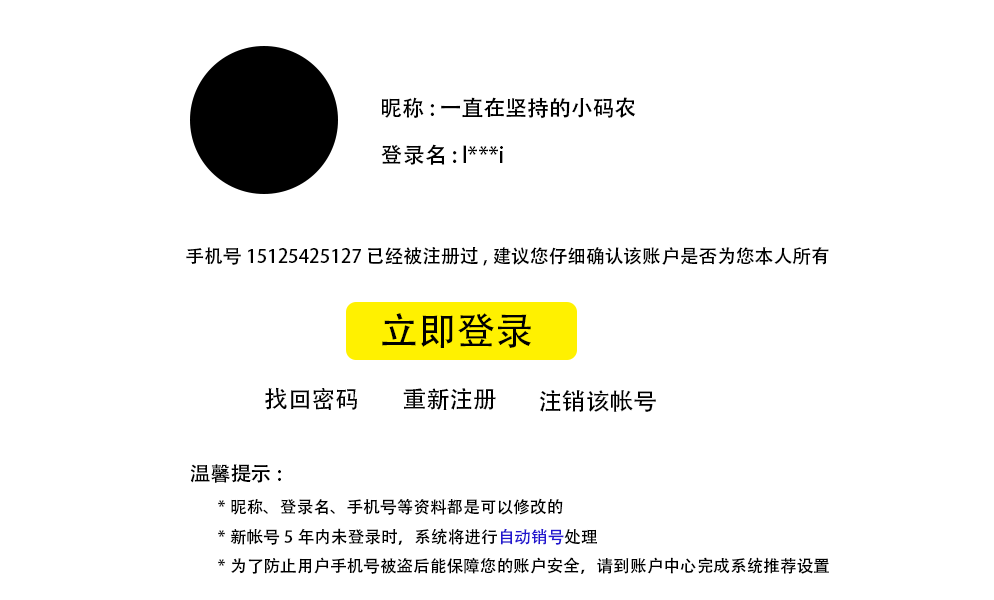
<style>
.page{position:relative;width:994px;height:600px;background:#ffffff}
.page>*{position:absolute;margin:0}
.t1{font:21.9px "AdobeHeitiStd-Regular";color:#000000}
.t2{font:18.7px "AdobeHeitiStd-Regular";color:#000000}
.t3{font:38.4px "AdobeHeitiStd-Regular";color:#000000}
.t4{font:23.7px "AdobeHeitiStd-Regular";color:#000000}
.t5{font:20.3px "AdobeHeitiStd-Regular";color:#000000}
.t6{font:16.7px "AdobeHeitiStd-Regular";color:#000000}
.t7{font:16.7px "AdobeHeitiStd-Regular";color:#2215cf}
</style>
<div class="page">
<p class="t1" style="left:381px;top:97px;width:255px;height:22px">昵称: 一直在坚持的小码农</p>
<p class="t1" style="left:381px;top:144px;width:122px;height:21px">登录名: l***i</p>
<p class="t2" style="left:186px;top:247px;width:643px;height:19px">手机号 15125425127 已经被注册过,建议您仔细确认该账户是否为您本人所有</p>
<p class="t3" style="left:382px;top:313px;width:149px;height:35px">立即登录</p>
<p class="t4" style="left:265px;top:387px;width:92px;height:23px">找回密码</p>
<p class="t4" style="left:403px;top:388px;width:93px;height:22px">重新注册</p>
<p class="t4" style="left:539px;top:390px;width:117px;height:22px">注销该帐号</p>
<p class="t5" style="left:190px;top:464px;width:91px;height:19px">温馨提示:</p>
<p class="t6" style="left:218px;top:498px;width:611px;height:76px">*昵称、登录名、手机号等资料都是可以修改的<br>*新帐号5年内未登录时，系统将进行<span class="t7">自动销号</span>处理<br>*为了防止用户手机号被盗后能保障您的账户安全，请到账户中心完成系统推荐设置</p>
</div>
